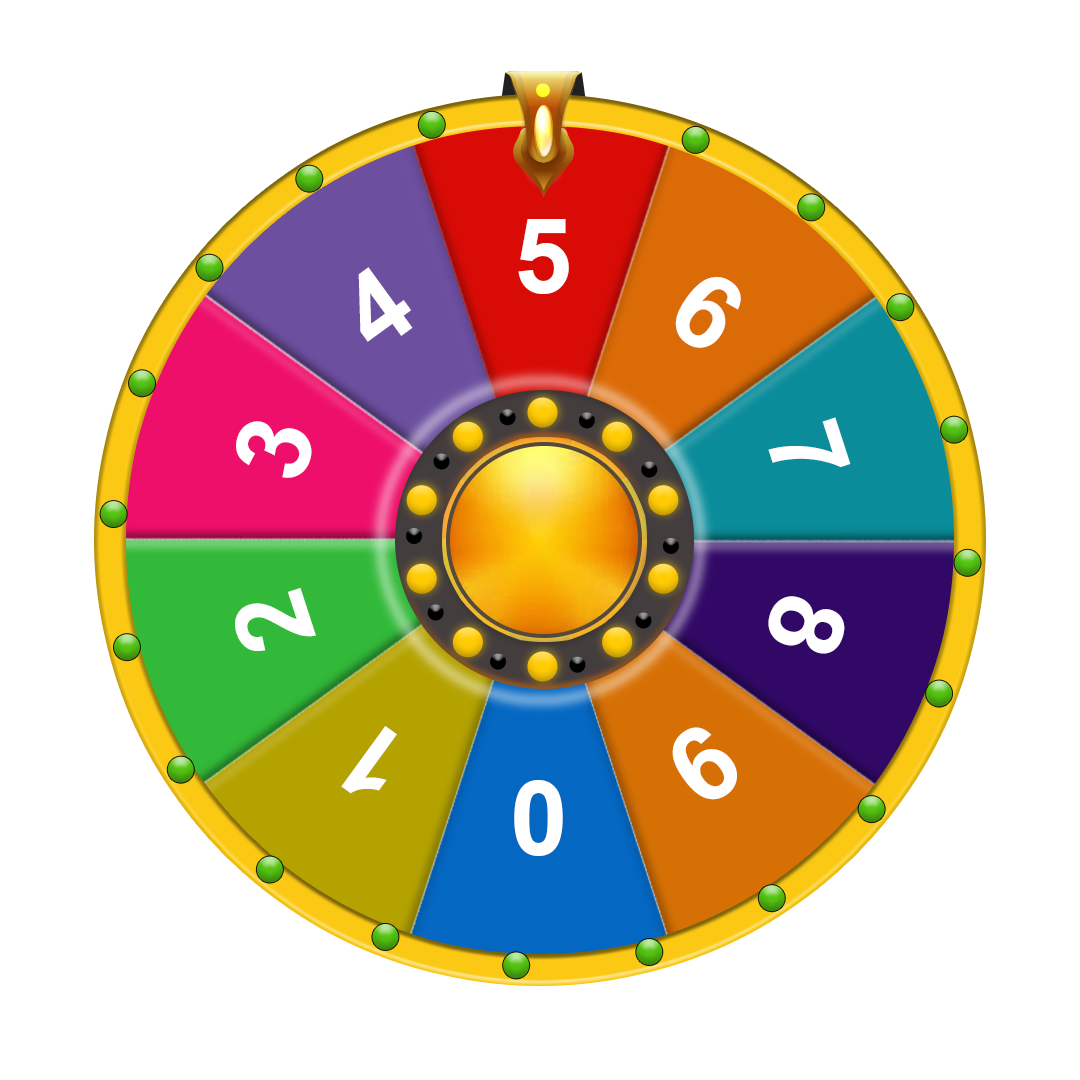
<style>
.page{position:relative;width:1080px;height:1080px;background:#ffffff}
.page>*{position:absolute;margin:0}
.t1{font:104.2px "Arial-BoldMT";color:#ffffff}
</style>
<div class="page">
<p class="t1" style="left:518px;top:219px;width:51px;height:75px">5</p>
<p class="t1" style="left:358px;top:267px;width:55px;height:75px;rotate:-36deg">4</p>
<p class="t1" style="left:675px;top:277px;width:66px;height:71px;rotate:36deg">6</p>
<p class="t1" style="left:236px;top:421px;width:76px;height:57px;rotate:-72deg">3</p>
<p class="t1" style="left:768px;top:417px;width:83px;height:51px;rotate:72deg">7</p>
<p class="t1" style="left:235px;top:588px;width:81px;height:63px;rotate:-108deg">2</p>
<p class="t1" style="left:768px;top:596px;width:77px;height:58px;rotate:108deg">8</p>
<p class="t1" style="left:341px;top:726px;width:56px;height:68px;rotate:-144deg">1</p>
<p class="t1" style="left:672px;top:727px;width:65px;height:73px;rotate:144deg">9</p>
<p class="t1" style="left:514px;top:780px;width:49px;height:76px;rotate:-180deg">0</p>
</div>
